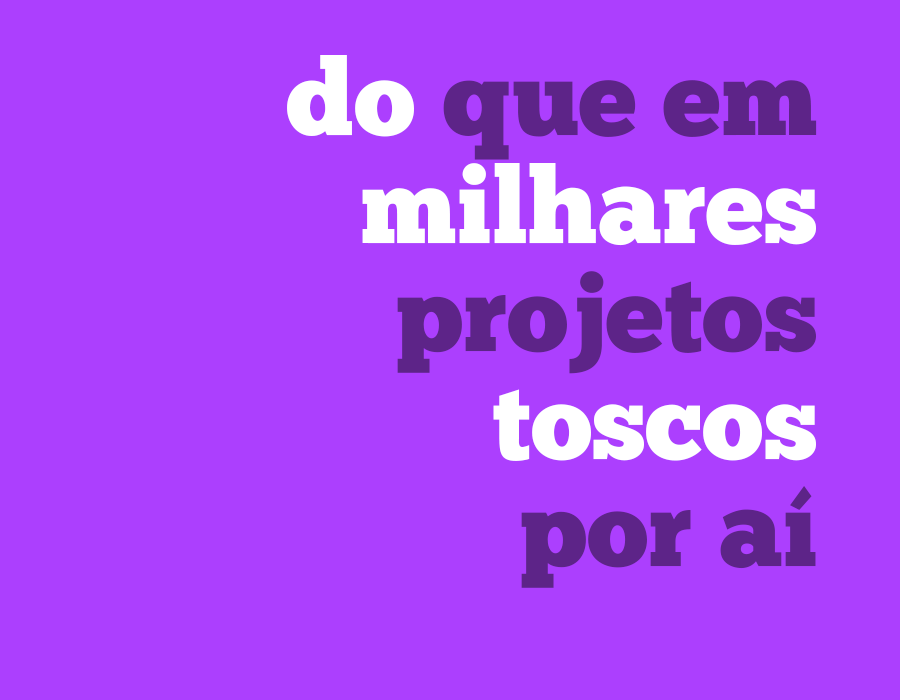
<style>
.page{position:relative;width:900px;height:700px;background:#ac3ffe}
.page>*{position:absolute;margin:0}
.t1{font:106.7px/107.8px "ChunkFive-Roman";color:#ffffff}
.t2{font:106.7px/107.8px "ChunkFive-Roman";color:#5d2488}
</style>
<div class="page">
<p class="t1" style="left:287px;top:55px;width:530px;height:533px;text-align:right">do<span class="t2"> que em<br></span>milhares<br><span class="t2">projetos<br></span>toscos<br><span class="t2">por aí</span></p>
</div>
